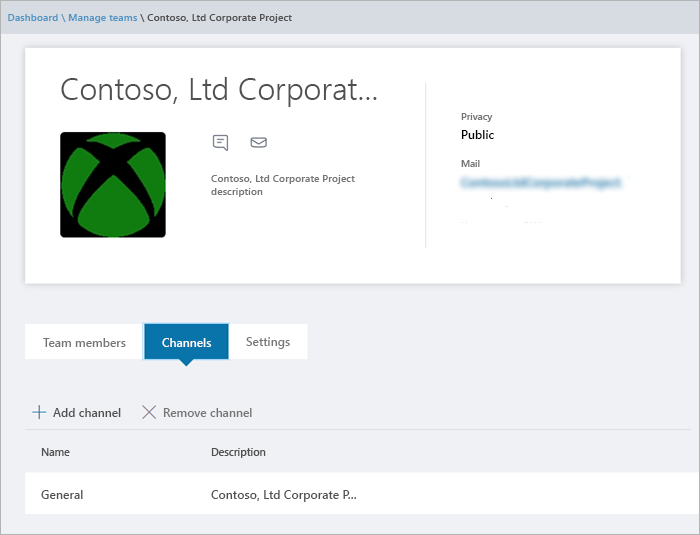
<style>
.page{position:relative;width:700px;height:535px;background:#ffffff}
.page>*{position:absolute;margin:0}
.t1{font:10.3px "SegoeUI-Semibold";color:#505050}
.t2{font:10.3px "SegoeUI-Semibold";color:#5194c3}
.t3{font:31.2px "SegoeUI-Semilight";color:#505050}
.t4{font:9.7px "SegoeUI-Semibold";color:#757575}
.t5{font:12px "SegoeUI-Semibold";color:#000000}
.t6{font:10.3px/13.3px "SegoeUI-Semibold";color:#757575}
.t7{font:12px "SegoeUI-Semibold";color:#757575}
.t8{font:12px "SegoeUI-Semibold";color:#ffffff}
.t9{font:12px "SegoeUI-Semibold";color:#505050}
.t10{font:10.5px "SegoeUI-Semibold";color:#505050}
.t11{font:12.1px "SegoeUI-Semibold";color:#505050}
</style>
<div class="page">
<p class="t1" style="left:8px;top:14px;width:284px;height:9px"><span class="t2">Dashboard \ Manage teams </span>\ Contoso, Ltd Corporate Project</p>
<p class="t3" style="left:61px;top:77px;width:316px;height:30px">Contoso, Ltd Corporat...</p>
<p class="t4" style="left:461px;top:113px;width:32px;height:9px">Privacy</p>
<p class="t5" style="left:461px;top:130px;width:33px;height:9px">Public</p>
<p class="t4" style="left:461px;top:160px;width:19px;height:7px">Mail</p>
<p class="t6" style="left:211px;top:175px;width:144px;height:22px">Contoso, Ltd Corporate Project<br>description</p>
<p class="t7" style="left:43px;top:338px;width:83px;height:9px">Team members</p>
<p class="t8" style="left:162px;top:338px;width:50px;height:9px">Channels</p>
<p class="t7" style="left:246px;top:337px;width:44px;height:12px">Settings</p>
<p class="t9" style="left:53px;top:408px;width:68px;height:9px">Add channel</p>
<p class="t7" style="left:163px;top:408px;width:89px;height:9px">Remove channel</p>
<p class="t10" style="left:41px;top:448px;width:29px;height:8px">Name</p>
<p class="t10" style="left:211px;top:448px;width:55px;height:10px">Description</p>
<p class="t11" style="left:41px;top:490px;width:42px;height:9px">General</p>
<p class="t11" style="left:211px;top:490px;width:145px;height:12px">Contoso, Ltd Corporate P...</p>
</div>
